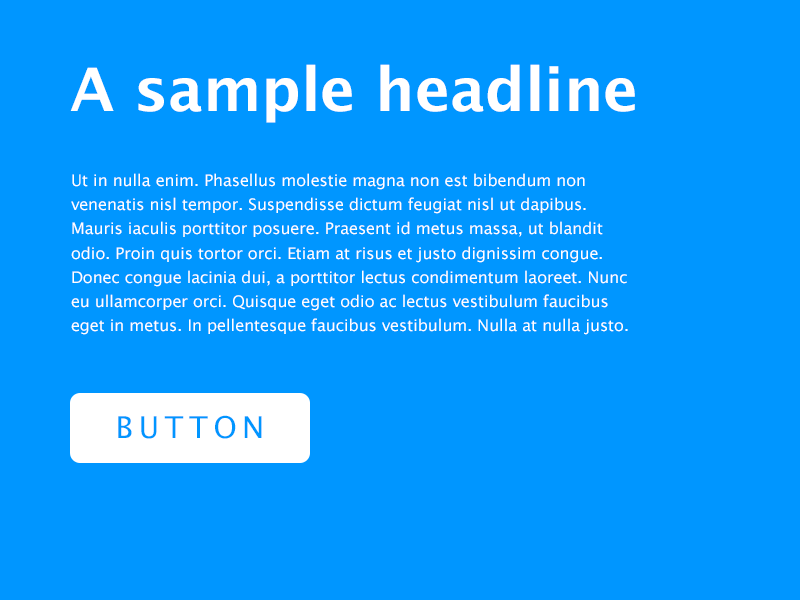
<style>
.page{position:relative;width:800px;height:600px;background:#0096ff}
.page>*{position:absolute;margin:0}
.t1{font:60px "LucidaGrande-Bold";color:#ffffff}
.t2{font:16px/24.2px "LucidaGrande";color:#ffffff}
.t3{font:30px "LucidaGrande";letter-spacing:0.18em;color:#0096ff;text-transform:uppercase}
</style>
<div class="page">
<p class="t1" style="left:70px;top:64px;width:565px;height:59px">A sample headline</p>
<p class="t2" style="left:71px;top:173px;width:557px;height:162px">Ut in nulla enim. Phasellus molestie magna non est bibendum non venenatis nisl tempor. Suspendisse dictum feugiat nisl ut dapibus. Mauris iaculis porttitor posuere. Praesent id metus massa, ut blandit odio. Proin quis tortor orci. Etiam at risus et justo dignissim congue. Donec congue lacinia dui, a porttitor lectus condimentum laoreet. Nunc eu ullamcorper orci. Quisque eget odio ac lectus vestibulum faucibus eget in metus. In pellentesque faucibus vestibulum. Nulla at nulla justo.</p>
<p class="t3" style="left:118px;top:415px;width:144px;height:24px">Button</p>
</div>
